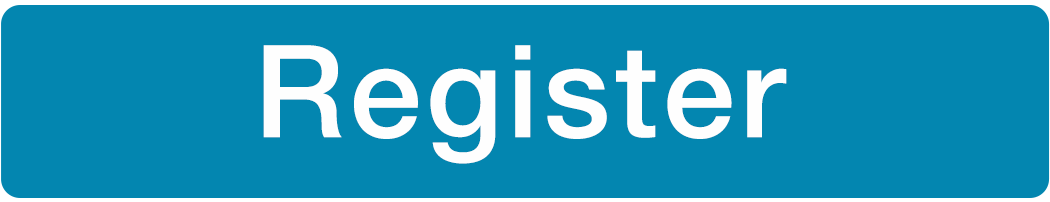
<style>
.page{position:relative;width:1050px;height:202px;background:#0386b0}
.page>*{position:absolute;margin:0}
.t1{font:128.4px "HelveticaNeueLTStd-Md";letter-spacing:0.04em;color:#fefefe}
</style>
<div class="page">
<p class="t1" style="left:263px;top:45px;width:524px;height:119px">Register</p>
</div>
